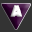
<style>
.page{position:relative;width:32px;height:32px;background:#333333}
.page>*{position:absolute;margin:0}
.t1{font:15.7px "BerlinSansFB-Bold";letter-spacing:0.005em;color:#ffffff;font-weight:bold;scale:0.96 1}
</style>
<div class="page">
<p class="t1" style="left:10px;top:5px;width:12px;height:12px">A</p>
</div>
